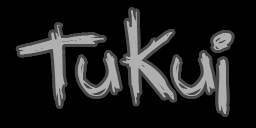
<style>
.page{position:relative;width:256px;height:128px;background:#000000}
.page>*{position:absolute;margin:0}
.t1{font:100px "Diediedie";color:#afafaf}
</style>
<div class="page">
<p class="t1" style="left:18px;top:10px;width:214px;height:104px">Tukui</p>
<p class="t1" style="left:18px;top:10px;width:214px;height:104px">Tukui</p>
</div>
